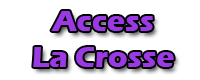
<style>
.page{position:relative;width:200px;height:80px;background:#ffffff}
.page>*{position:absolute;margin:0}
.t1{font:30px "ErasITC-Bold";color:#9b39e5}
</style>
<div class="page">
<p class="t1" style="left:33px;top:11px;width:141px;height:56px;text-align:center">Access <br>La Crosse</p>
</div>
